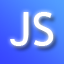
<style>
.page{position:relative;width:64px;height:64px}
.page>*{position:absolute;margin:0}
.t1{font:48px "TrebuchetMS";color:#ffffff}
</style>
<div class="page">
<p class="t1" style="left:10px;top:12px;width:44px;height:34px">JS</p>
</div>
